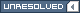
<style>
.page{position:relative;width:80px;height:13px;background:#536c88}
.page>*{position:absolute;margin:0}
.t1{font:8px "BitDustTwo";color:#ffffff}
</style>
<div class="page">
<p class="t1" style="left:4px;top:4px;width:59px;height:5px">UNRESOLVED</p>
</div>
